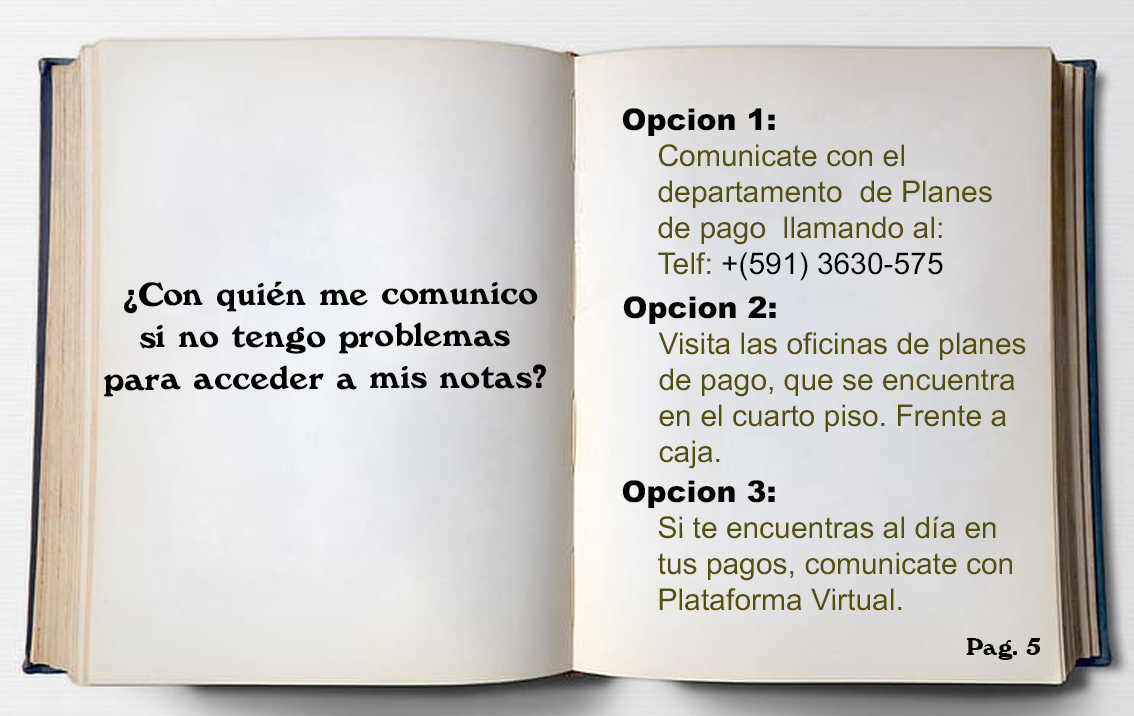
<style>
.page{position:relative;width:1134px;height:716px}
.page>*{position:absolute;margin:0}
.t1{font:30px "ArialMT";color:#564e09}
.t2{font:30px "Arial-Black";color:#020202}
.t3{font:30px "ArialMT";color:#020202}
.t4{font:35px "Windsor-Regular";color:#020202}
.t5{font:25px "Windsor-Regular";color:#040404}
</style>
<div class="page">
<p class="t1" style="left:622px;top:108px;width:370px;height:173px"><span class="t2">Opcion 1: <br>  </span>Comunicate con el <br> departamento  de Planes <br> de pago  llamando al:<br> Telf: <span class="t3">+(591) 3630-575</span></p>
<p class="t4" style="left:104px;top:281px;width:442px;height:116px;text-align:center">¿Con quién me comunico<br> si no tengo problemas<br> para acceder a mis notas?</p>
<p class="t1" style="left:623px;top:296px;width:403px;height:173px"><span class="t2">Opcion 2: <br>  </span>Visita las oficinas de planes<br> de pago, que se encuentra<br> en el cuarto piso. Frente a <br> caja.</p>
<p class="t1" style="left:622px;top:480px;width:390px;height:131px"><span class="t2">Opcion 3: <br>  </span>Si te encuentras al día en<br> tus pagos, comunicate con <br> Plataforma Virtual.</p>
<p class="t5" style="left:966px;top:637px;width:75px;height:23px">Pag. 5</p>
</div>
